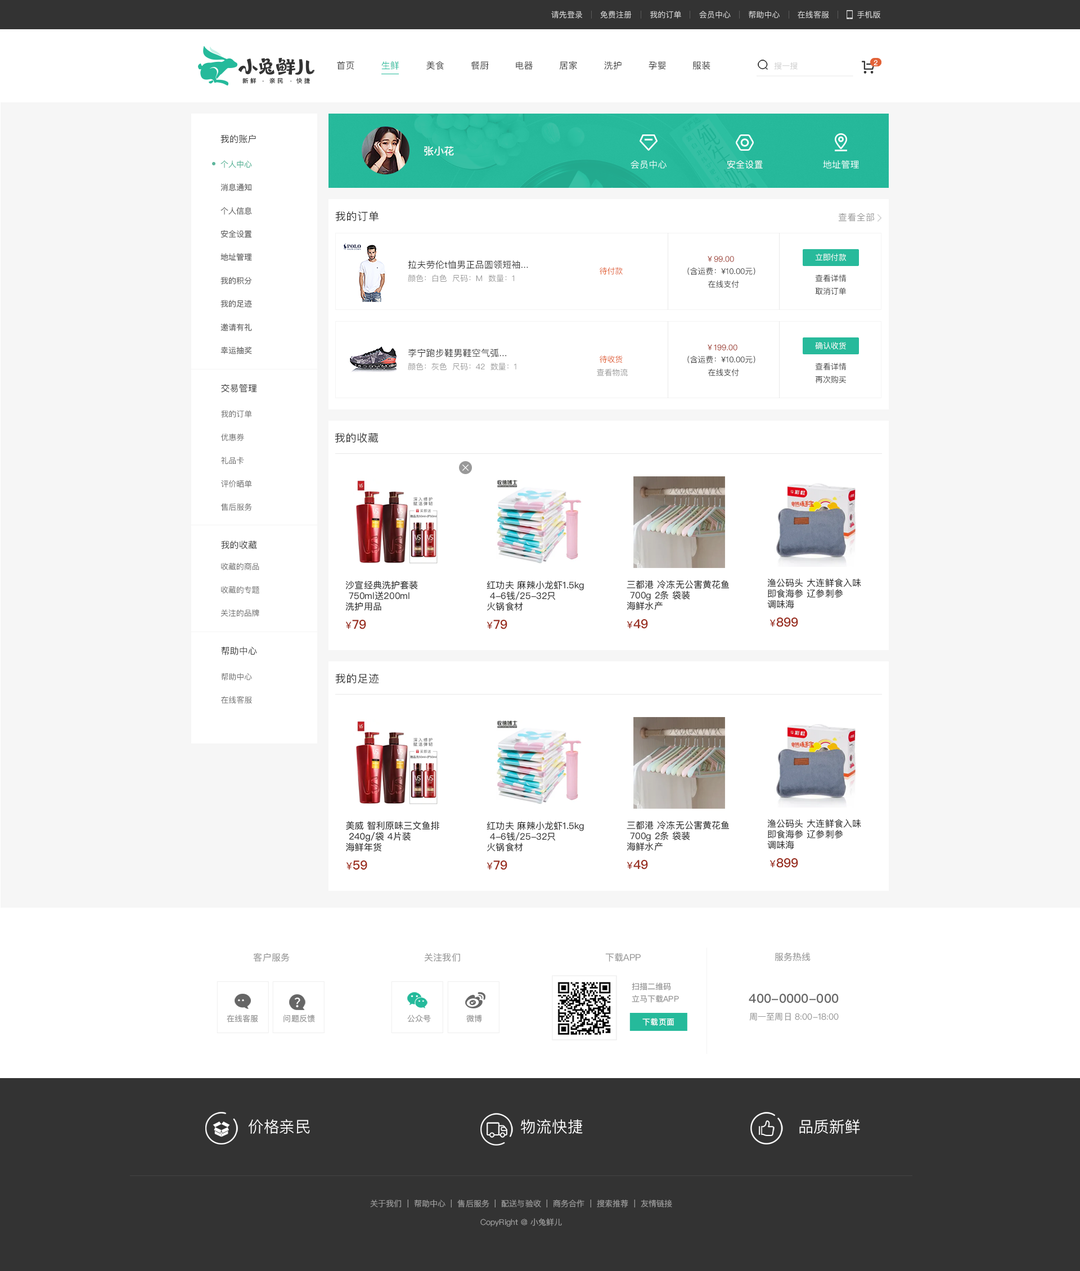
<style>
.page{position:relative;width:1080px;height:1271px;background:#ffffff}
.page>*{position:absolute;margin:0}
.t1{font:7.9px "PingFangSC-Regular";letter-spacing:0.01em;color:#dcdcdc}
.t2{font:9px "PingFangSC-Regular";letter-spacing:0.01em;color:#333333}
.t3{font:9px "PingFangSC-Regular";letter-spacing:0.01em;color:#25ba9b}
.t4{font:7.9px "PingFangSC-Regular";letter-spacing:0.01em;color:#cccccc}
.t5{font:7.1px "PingFangSC-Medium";letter-spacing:0.01em;color:#ffffff}
.t6{font:10.1px "PingFangSC-Medium";letter-spacing:0.01em;color:#ffffff}
.t7{font:7.9px/11.6px "PingFangSC-Regular";letter-spacing:0.01em;color:#666666}
.t8{font:7.9px/11.6px "PingFangSC-Regular";letter-spacing:0.01em;color:#5cb99e}
.t9{font:9px "PingFangSC-Regular";letter-spacing:0.01em;color:#ffffff}
.t10{font:10.7px "PingFangSC-Regular";letter-spacing:0.01em;color:#333333}
.t11{font:9px "PingFangSC-Regular";letter-spacing:0.01em;color:#999999}
.t12{font:7.9px "PingFangSC-Regular";letter-spacing:0.01em;color:#9a2e1f}
.t13{font:7.9px "PingFangSC-Regular";letter-spacing:0.01em;color:#ffffff}
.t14{font:7.9px "PingFangSC-Regular";letter-spacing:0.01em;color:#e05e30}
.t15{font:7.9px "PingFangSC-Regular";letter-spacing:0.01em;color:#333333}
.t16{font:7.9px "PingFangSC-Regular";letter-spacing:0.01em;color:#999999}
.t17{font:12.4px "PingFangSC-Medium";letter-spacing:0.01em;color:#9a2e1f}
.t18{font:9.7px "PingFangSC-Regular";letter-spacing:0.01em;color:#9a2e1f}
.t19{font:12.4px "PingFangSC-Semibold";letter-spacing:0.01em;color:#666666}
.t20{font:8.4px "PingFangSC-Light";letter-spacing:0.01em;color:#999999}
.t21{font:7.8px "PingFangSC-Regular";letter-spacing:0.01em;color:#ffffff}
.t22{font:15.5px "PingFangSC-Light";letter-spacing:0.01em;color:#ffffff}
.t23{font:7.9px "PingFangSC-Light";letter-spacing:0.01em;color:#999999}
</style>
<div class="page">
<p class="t1" style="left:551px;top:11px;width:31px;height:8px">请先登录</p>
<p class="t1" style="left:600px;top:11px;width:32px;height:8px">免费注册</p>
<p class="t1" style="left:650px;top:11px;width:31px;height:8px">我的订单</p>
<p class="t1" style="left:699px;top:11px;width:32px;height:8px">会员中心</p>
<p class="t1" style="left:749px;top:11px;width:31px;height:8px">帮助中心</p>
<p class="t1" style="left:798px;top:11px;width:31px;height:8px">在线客服</p>
<p class="t1" style="left:857px;top:11px;width:23px;height:8px">手机版</p>
<p class="t2" style="left:337px;top:61px;width:17px;height:9px">首页</p>
<p class="t3" style="left:381px;top:61px;width:18px;height:9px">生鲜</p>
<p class="t2" style="left:426px;top:61px;width:18px;height:9px">美食</p>
<p class="t2" style="left:471px;top:61px;width:18px;height:9px">餐厨</p>
<p class="t2" style="left:516px;top:61px;width:17px;height:9px">电器</p>
<p class="t2" style="left:560px;top:61px;width:17px;height:9px">居家</p>
<p class="t2" style="left:604px;top:61px;width:18px;height:9px">洗护</p>
<p class="t2" style="left:649px;top:61px;width:17px;height:9px">孕婴</p>
<p class="t2" style="left:693px;top:61px;width:17px;height:9px">服装</p>
<p class="t4" style="left:774px;top:62px;width:24px;height:8px">搜一搜</p>
<p class="t5" style="left:874px;top:60px;width:4px;height:5px">2</p>
<p class="t2" style="left:220px;top:134px;width:36px;height:9px">我的账户</p>
<p class="t6" style="left:424px;top:146px;width:30px;height:10px">张小花</p>
<p class="t7" style="left:220px;top:160px;width:32px;height:194px"><span class="t8">个人中心<br></span><br>消息通知<br><br>个人信息<br><br>安全设置<br><br>地址管理<br><br>我的积分<br><br>我的足迹<br><br>邀请有礼<br><br>幸运抽奖</p>
<p class="t9" style="left:631px;top:160px;width:36px;height:9px">会员中心</p>
<p class="t9" style="left:727px;top:160px;width:36px;height:9px">安全设置</p>
<p class="t9" style="left:823px;top:160px;width:36px;height:9px">地址管理</p>
<p class="t10" style="left:335px;top:211px;width:44px;height:11px">我的订单</p>
<p class="t11" style="left:838px;top:213px;width:36px;height:9px">查看全部</p>
<p class="t12" style="left:708px;top:256px;width:26px;height:6px">￥99.00</p>
<p class="t13" style="left:815px;top:254px;width:32px;height:7px">立即付款</p>
<p class="t2" style="left:408px;top:260px;width:120px;height:9px">拉夫劳伦t恤男正品圆领短袖...</p>
<p class="t14" style="left:600px;top:267px;width:23px;height:8px">待付款</p>
<p class="t15" style="left:687px;top:267px;width:68px;height:8px">（含运费：¥10.00元）</p>
<p class="t16" style="left:408px;top:274px;width:106px;height:8px">颜色：白色  尺码：M  数量：1</p>
<p class="t15" style="left:708px;top:280px;width:31px;height:8px">在线支付</p>
<p class="t15" style="left:815px;top:274px;width:32px;height:8px">查看详情</p>
<p class="t15" style="left:815px;top:287px;width:31px;height:8px">取消订单</p>
<p class="t13" style="left:815px;top:342px;width:31px;height:8px">确认收货</p>
<p class="t2" style="left:408px;top:349px;width:98px;height:8px">李宁跑步鞋男鞋空气弧...</p>
<p class="t12" style="left:708px;top:344px;width:29px;height:6px">￥199.00</p>
<p class="t16" style="left:408px;top:363px;width:108px;height:8px">颜色：灰色  尺码：42  数量：1</p>
<p class="t14" style="left:600px;top:356px;width:23px;height:7px">待收货</p>
<p class="t15" style="left:687px;top:356px;width:68px;height:7px">（含运费：¥10.00元）</p>
<p class="t15" style="left:815px;top:363px;width:32px;height:8px">查看详情</p>
<p class="t16" style="left:597px;top:368px;width:31px;height:8px">查看物流</p>
<p class="t15" style="left:708px;top:368px;width:31px;height:8px">在线支付</p>
<p class="t15" style="left:815px;top:376px;width:31px;height:8px">再次购买</p>
<p class="t2" style="left:221px;top:384px;width:36px;height:9px">交易管理</p>
<p class="t7" style="left:221px;top:410px;width:31px;height:101px">我的订单<br><br>优惠券<br><br>礼品卡<br><br>评价晒单<br><br>售后服务</p>
<p class="t10" style="left:335px;top:433px;width:44px;height:10px">我的收藏</p>
<p class="t2" style="left:221px;top:541px;width:36px;height:9px">我的收藏</p>
<p class="t7" style="left:220px;top:562px;width:39px;height:55px">收藏的商品<br><br>收藏的专题<br><br>关注的品牌</p>
<p class="t2" style="left:345px;top:580px;width:73px;height:31px">沙宣经典洗护套装<br> 750ml送200ml<br>洗护用品</p>
<p class="t2" style="left:487px;top:580px;width:97px;height:31px">红功夫 麻辣小龙虾1.5kg<br> 4-6钱/25-32只 <br>火锅食材</p>
<p class="t2" style="left:627px;top:580px;width:102px;height:30px">三都港 冷冻无公害黄花鱼<br> 700g 2条 袋装 <br>海鲜水产</p>
<p class="t2" style="left:767px;top:578px;width:94px;height:31px">渔公码头 大连鲜食入味<br>即食海参 辽参刺参 <br>调味海</p>
<p class="t17" style="left:776px;top:617px;width:22px;height:10px">899</p>
<p class="t18" style="left:345px;top:622px;width:7px;height:7px">￥</p>
<p class="t17" style="left:352px;top:619px;width:14px;height:10px">79</p>
<p class="t18" style="left:487px;top:622px;width:6px;height:7px">￥</p>
<p class="t17" style="left:493px;top:619px;width:14px;height:10px">79</p>
<p class="t18" style="left:627px;top:621px;width:6px;height:8px">￥</p>
<p class="t17" style="left:633px;top:619px;width:15px;height:10px">49</p>
<p class="t18" style="left:770px;top:619px;width:6px;height:8px">￥</p>
<p class="t2" style="left:221px;top:646px;width:36px;height:9px">帮助中心</p>
<p class="t7" style="left:221px;top:673px;width:31px;height:31px">帮助中心<br><br>在线客服</p>
<p class="t10" style="left:335px;top:673px;width:44px;height:11px">我的足迹</p>
<p class="t2" style="left:487px;top:821px;width:97px;height:31px">红功夫 麻辣小龙虾1.5kg<br> 4-6钱/25-32只 <br>火锅食材</p>
<p class="t2" style="left:627px;top:821px;width:102px;height:30px">三都港 冷冻无公害黄花鱼<br> 700g 2条 袋装 <br>海鲜水产</p>
<p class="t2" style="left:767px;top:819px;width:94px;height:30px">渔公码头 大连鲜食入味<br>即食海参 辽参刺参 <br>调味海</p>
<p class="t17" style="left:776px;top:858px;width:22px;height:10px">899</p>
<p class="t18" style="left:487px;top:862px;width:6px;height:8px">￥</p>
<p class="t17" style="left:493px;top:860px;width:14px;height:10px">79</p>
<p class="t18" style="left:627px;top:862px;width:6px;height:8px">￥</p>
<p class="t17" style="left:633px;top:860px;width:15px;height:10px">49</p>
<p class="t18" style="left:770px;top:860px;width:6px;height:8px">￥</p>
<p class="t11" style="left:253px;top:953px;width:37px;height:9px">客户服务</p>
<p class="t11" style="left:424px;top:953px;width:36px;height:9px">关注我们</p>
<p class="t11" style="left:605px;top:953px;width:36px;height:9px">下载APP</p>
<p class="t11" style="left:775px;top:952px;width:36px;height:9px">服务热线</p>
<p class="t16" style="left:632px;top:983px;width:39px;height:8px">扫描二维码</p>
<p class="t16" style="left:632px;top:995px;width:47px;height:8px">立马下载APP</p>
<p class="t19" style="left:749px;top:994px;width:90px;height:10px">400-0000-000</p>
<p class="t20" style="left:749px;top:1013px;width:90px;height:8px">周一至周日 8:00-18:00</p>
<p class="t16" style="left:227px;top:1015px;width:31px;height:8px">在线客服</p>
<p class="t16" style="left:284px;top:1015px;width:31px;height:8px">问题反馈</p>
<p class="t16" style="left:407px;top:1015px;width:24px;height:8px">公众号</p>
<p class="t16" style="left:466px;top:1015px;width:16px;height:8px">微博</p>
<p class="t21" style="left:642px;top:1018px;width:32px;height:8px">下载页面</p>
<p class="t22" style="left:249px;top:1119px;width:61px;height:15px">价格亲民</p>
<p class="t22" style="left:521px;top:1119px;width:62px;height:15px">物流快捷</p>
<p class="t22" style="left:799px;top:1119px;width:61px;height:16px">品质新鲜</p>
<p class="t23" style="left:370px;top:1200px;width:302px;height:27px;text-align:center">关于我们  |  帮助中心  |  售后服务  |  配送与验收  |  商务合作  |  搜索推荐  |  友情链接<br><br>CopyRight @ 小兔鲜儿</p>
</div>
